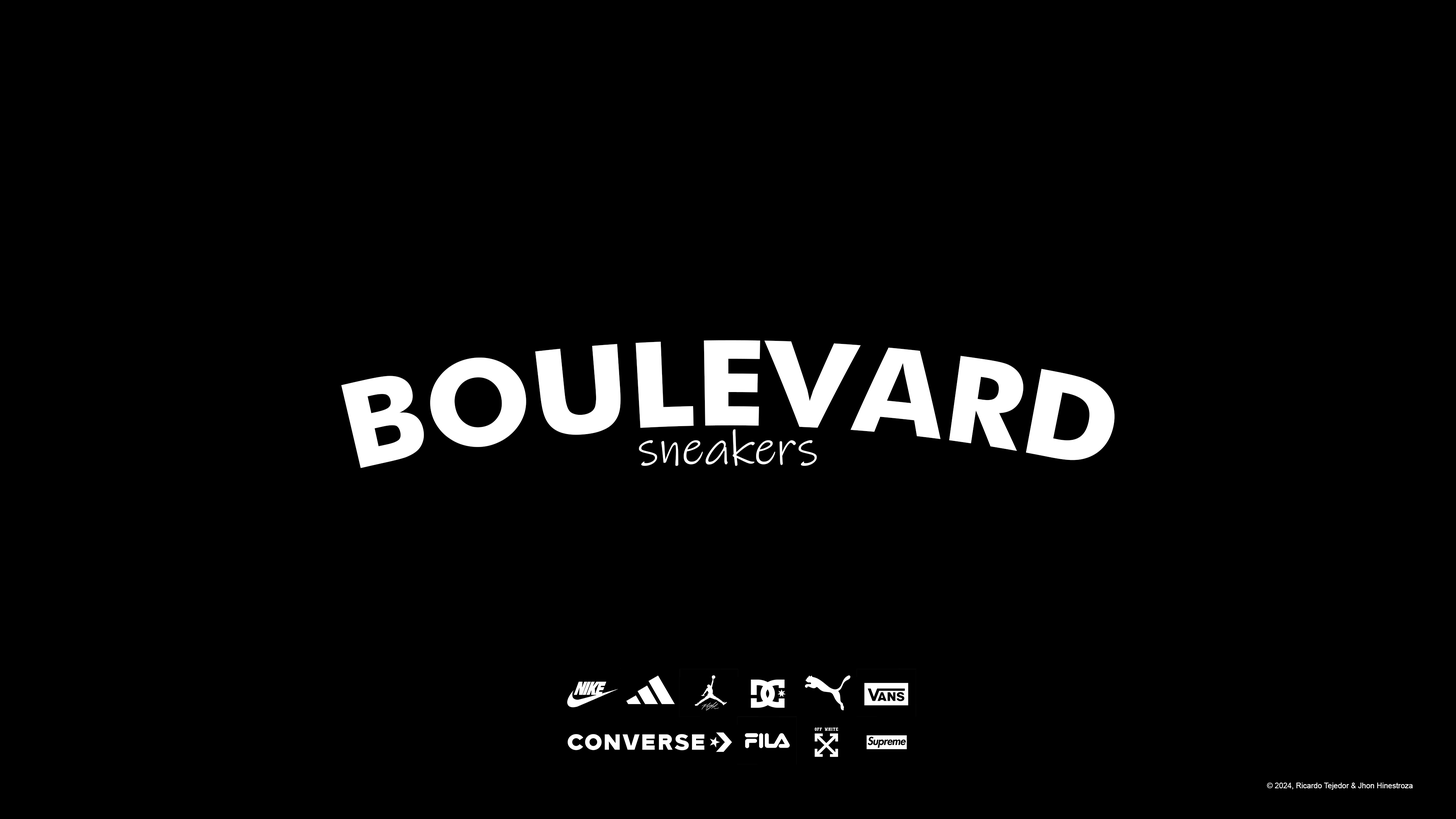
<style>
.page{position:relative;width:1456px;height:819px;background:#000000}
.page>*{position:absolute;margin:0}
.t1{font:119px "Futura-Bold";color:#ffffff}
.t2{font:49px "InkFree";color:#ffffff}
.t3{font:7.6px "ArialMT";color:#ffffff}
</style>
<div class="page">
<p class="t1" style="left:341px;top:340px;width:774px;height:128px">BOULEVARD</p>
<p class="t2" style="left:639px;top:429px;width:178px;height:37px">sneakers</p>
<p class="t3" style="left:1267px;top:783px;width:146px;height:7px">© 2024, Ricardo Tejedor &amp; Jhon Hinestroza</p>
</div>
